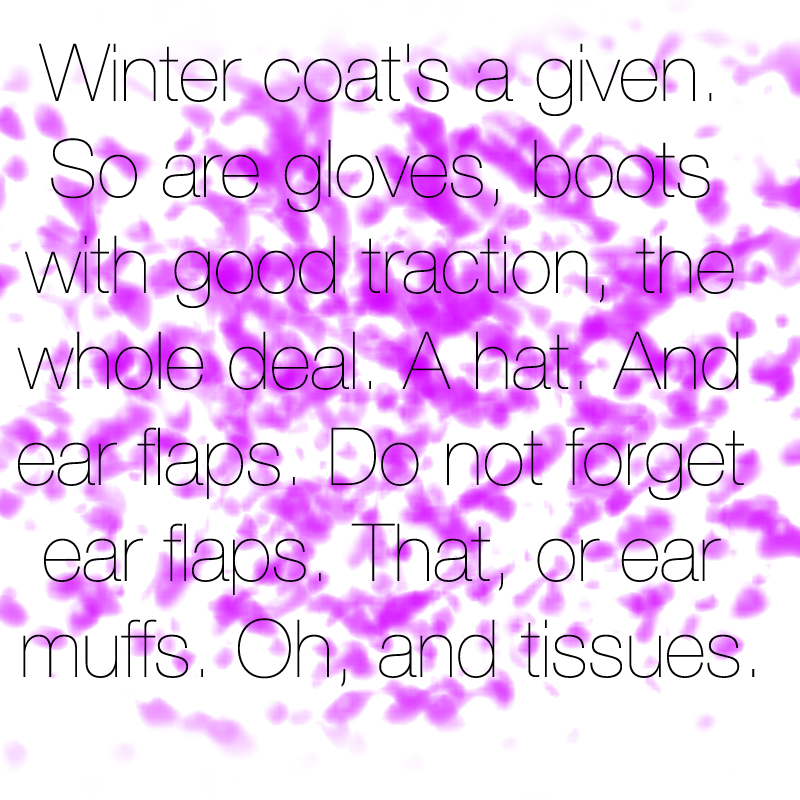
<style>
.page{position:relative;width:800px;height:800px;background:#ffffff}
.page>*{position:absolute;margin:0}
.t1{font:80px "HelveticaNeue-UltraLight";color:#000000}
</style>
<div class="page">
<p class="t1" style="left:17px;top:43px;width:738px;height:644px;text-align:center">Winter coat's a given. <br>So are gloves, boots <br>with good traction, the <br>whole deal. A hat. And <br>ear flaps. Do not forget <br>ear flaps. That, or ear <br>muffs. Oh, and tissues.</p>
</div>
